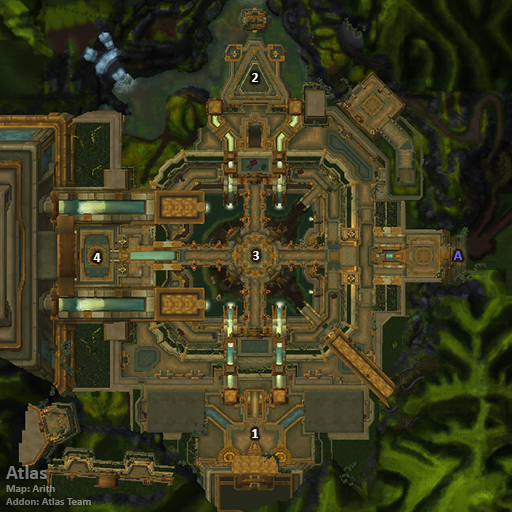
<style>
.page{position:relative;width:512px;height:512px}
.page>*{position:absolute;margin:0}
.t1{font:14px "Calibri-Bold";color:#ffffff}
.t2{font:14px "Calibri-Bold";color:#6666ff}
.t3{font:11px "Calibri-Bold";color:#797b77}
.t4{font:20px "Calibri-Bold";color:#797b77}
</style>
<div class="page">
<p class="t1" style="left:252px;top:73px;width:7px;height:9px">2</p>
<p class="t1" style="left:93px;top:253px;width:8px;height:9px">4</p>
<p class="t1" style="left:253px;top:251px;width:6px;height:9px">3</p>
<p class="t2" style="left:453px;top:251px;width:9px;height:9px">A</p>
<p class="t1" style="left:252px;top:429px;width:6px;height:9px">1</p>
<p class="t3" style="left:6px;top:465px;width:85px;height:40px"><span class="t4">Atlas<br></span>Map: Arith<br>Addon: Atlas Team</p>
</div>
